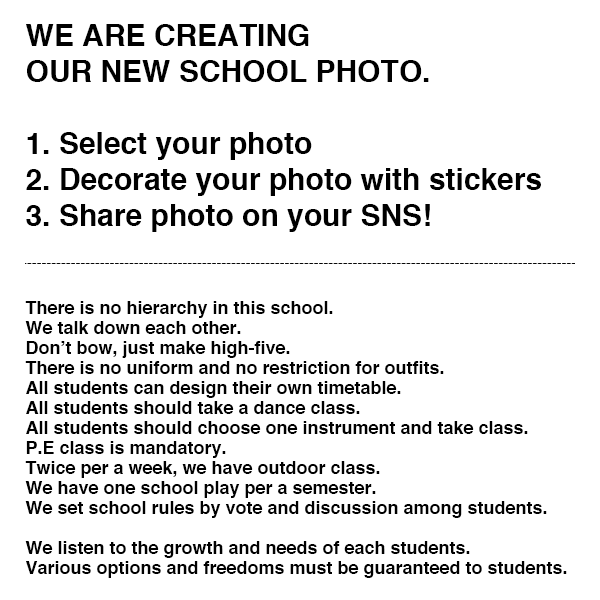
<style>
.page{position:relative;width:600px;height:600px;background:#ffffff}
.page>*{position:absolute;margin:0}
.t1{font:30px/36px "Helvetica-Bold";color:#000000}
.t2{font:18px/20px "Helvetica-Bold";color:#000000}
</style>
<div class="page">
<p class="t1" style="left:26px;top:24px;width:515px;height:208px">WE ARE CREATING<br>OUR NEW SCHOOL PHOTO.<br><br>1. Select your photo<br>2. Decorate your photo with stickers<br>3. Share photo on your SNS!</p>
<p class="t2" style="left:25px;top:301px;width:542px;height:277px">There is no hierarchy in this school.<br>We talk down each other.<br>Don’t bow, just make high-five. <br>There is no uniform and no restriction for outfits.<br>All students can design their own timetable.<br>All students should take a dance class.<br>All students should choose one instrument and take class.<br>P.E class is mandatory.<br>Twice per a week, we have outdoor class.<br>We have one school play per a semester.<br>We set school rules by vote and discussion among students.<br><br>We listen to the growth and needs of each students.<br>Various options and freedoms must be guaranteed to students.</p>
</div>
